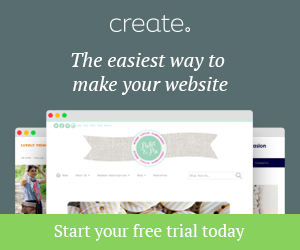
<style>
.page{position:relative;width:300px;height:250px;background:#586d70}
.page>*{position:absolute;margin:0}
.t1{font:20px/24px "PTSerif-Italic";color:#ffffff}
.t2{font:17px "PTSerif-Regular";color:#ffffff}
</style>
<div class="page">
<p class="t1" style="left:71px;top:52px;width:157px;height:43px;text-align:center">The easiest way to <br>make your website</p>
<p class="t2" style="left:54px;top:224px;width:191px;height:17px">Start your free trial today</p>
</div>
